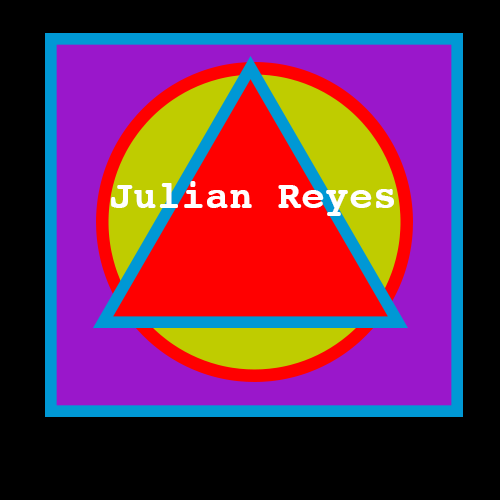
<style>
.page{position:relative;width:500px;height:500px;background:#000000}
.page>*{position:absolute;margin:0}
.t1{font:40px "Courier-Bold";color:#ffffff}
</style>
<div class="page">
<p class="t1" style="left:111px;top:181px;width:283px;height:35px">Julian Reyes</p>
</div>
